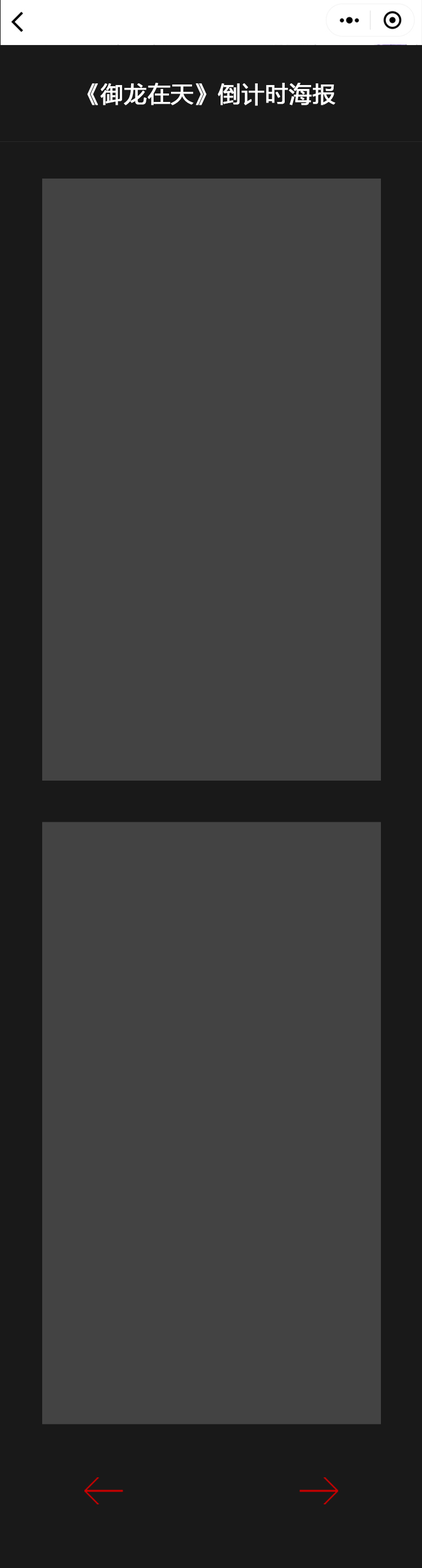
<style>
.page{position:relative;width:422px;height:1568px;background:#434343}
.page>*{position:absolute;margin:0}
.t1{font:22.5px "MicrosoftYaHei";color:#ffffff;text-transform:uppercase;font-weight:bold}
</style>
<div class="page">
<p class="t1" style="left:87px;top:83px;width:249px;height:23px">《御龙在天》倒计时海报</p>
</div>
